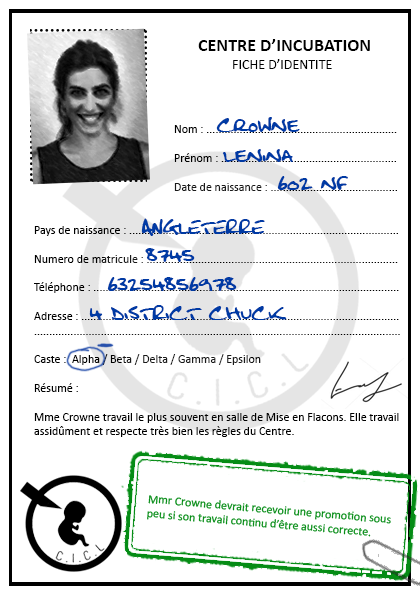
<style>
.page{position:relative;width:420px;height:595px;background:#ffffff}
.page>*{position:absolute;margin:0}
.t1{font:18px "Calibri-Bold";color:#000000}
.t2{font:14px "Calibri";color:#000000}
.t3{font:12px "Calibri"}
.t4{font:19px "FatboySlimBLTC(BRK)";color:#003aa4}
.t5{font:12px "Calibri";color:#000000}
.t6{font:12px "Calibri";color:#058c15}
</style>
<div class="page">
<p class="t1" style="left:198px;top:39px;width:172px;height:12px">CENTRE D’INCUBATION</p>
<p class="t2" style="left:233px;top:59px;width:99px;height:10px">FICHE D’IDENTITE</p>
<p class="t3" style="left:174px;top:125px;width:223px;height:66px">Nom : ...............................................................<br><br>Prénom : ..........................................................<br><br>Date de naissance : ..........................................</p>
<p class="t4" style="left:216px;top:117px;width:84px;height:15px">Crowne</p>
<p class="t4" style="left:222px;top:149px;width:71px;height:13px">lenina</p>
<p class="t4" style="left:277px;top:176px;width:71px;height:14px">602 nf</p>
<p class="t4" style="left:141px;top:218px;width:124px;height:18px">ANGLETERRE</p>
<p class="t5" style="left:34px;top:226px;width:366px;height:211px">Pays de naissance : .........................................................................................<br><br>Numero de matricule : ...................................................................................<br><br>Téléphone : .....................................................................................................<br><br>Adresse : .........................................................................................................<br>.........................................................................................................................<br><br>Caste :  Alpha / Beta / Delta / Gamma / Epsilon <br><br>Résumé :<br><br>Mme Crowne travail le plus souvent en salle de Mise en Flacons. Elle travail<br>assidûment et respecte très bien les règles du Centre.</p>
<p class="t4" style="left:145px;top:248px;width:50px;height:14px">8745</p>
<p class="t4" style="left:107px;top:277px;width:130px;height:14px">63254856978</p>
<p class="t4" style="left:89px;top:305px;width:198px;height:15px">4 DISTRICT CHUCK</p>
<p class="t6" style="left:147px;top:495px;width:244px;height:42px;rotate:5deg">Mmr Crowne devrait recevoir une promotion sous <br>peu si son travail continu d’être aussi correcte.</p>
</div>
